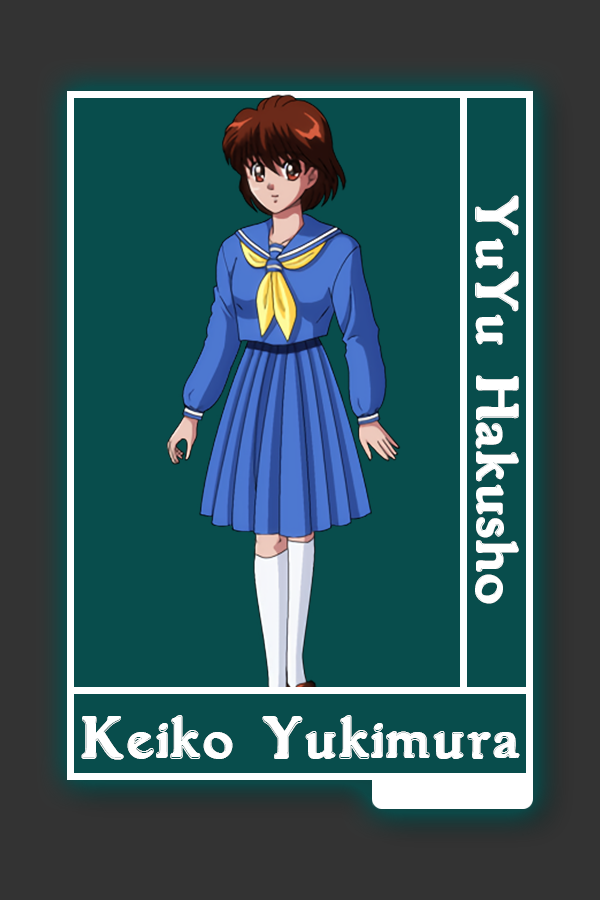
<style>
.page{position:relative;width:600px;height:900px;background:#084d4c}
.page>*{position:absolute;margin:0}
.t1{font:55.2px "GranthamOutline";color:#ffffff}
.t2{font:55.4px "GranthamOutline";color:#ffffff}
</style>
<div class="page">
<p class="t1" style="left:475px;top:195px;width:44px;height:409px;rotate:90deg">YuYu Hakusho</p>
<p class="t2" style="left:81px;top:715px;width:439px;height:45px">Keiko Yukimura</p>
</div>
